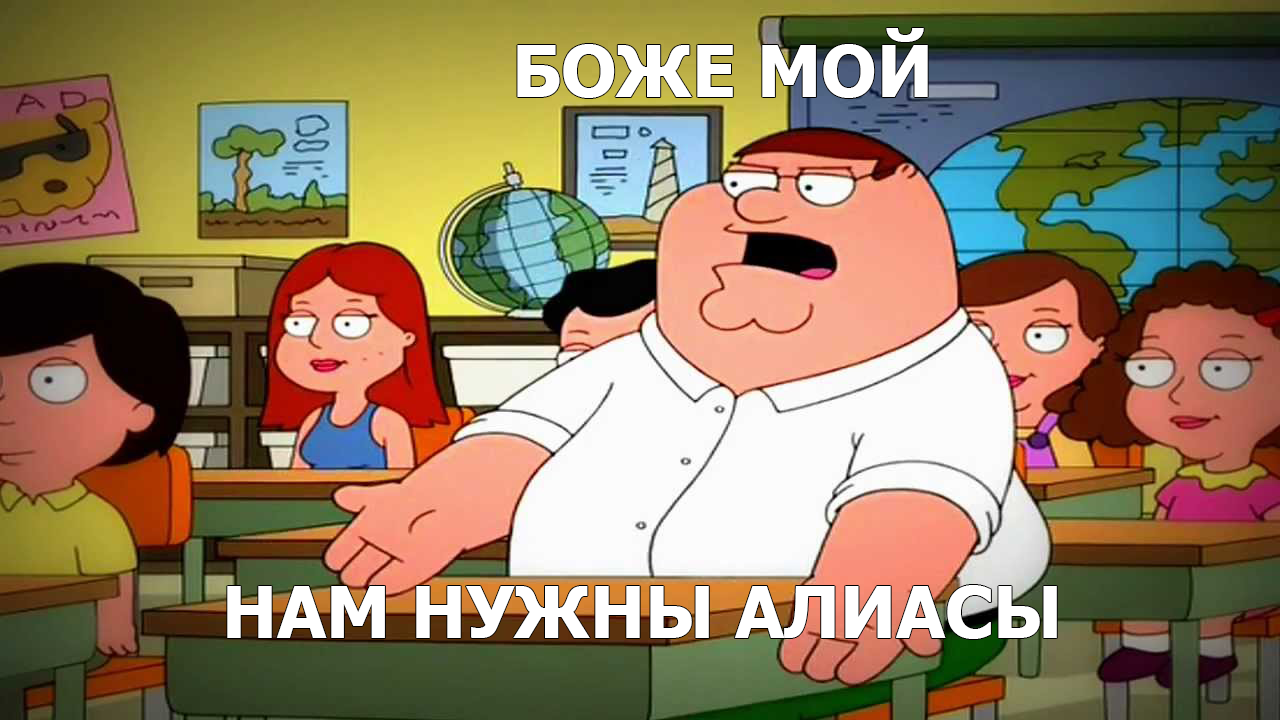
<style>
.page{position:relative;width:1280px;height:720px}
.page>*{position:absolute;margin:0}
.t1{font:72px "Tahoma-Bold";color:#ffffff}
</style>
<div class="page">
<p class="t1" style="left:517px;top:28px;width:411px;height:70px">БОЖЕ МОЙ</p>
<p class="t1" style="left:227px;top:585px;width:830px;height:54px">НАМ НУЖНЫ АЛИАСЫ</p>
</div>
